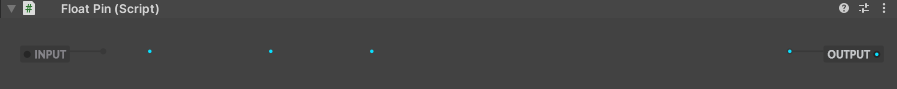
<style>
.page{position:relative;width:897px;height:89px;background:#424242}
.page>*{position:absolute;margin:0}
.t1{font:10px "Lato-Bold";color:#858489;font-weight:bold}
.t2{font:10px "Lato-Bold";color:#c4c6c8;font-weight:bold}
</style>
<div class="page">
<p class="t1" style="left:35px;top:50px;width:32px;height:9px">INPUT</p>
<p class="t2" style="left:827px;top:50px;width:44px;height:9px">OUTPUT</p>
</div>
